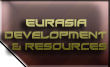
<style>
.page{position:relative;width:110px;height:67px}
.page>*{position:absolute;margin:0}
.t1{font:9.5px "Xirod-Regular";scale:0.96 1}
.t2{font:9.1px "Xirod-Regular";scale:0.96 1}
.t3{font:10px "Xirod-Regular";scale:0.96 1}
</style>
<div class="page">
<p class="t1" style="left:4px;top:19px;width:103px;height:31px"><span class="t2">       </span><span class="t3">EURASIA <br> </span>DEVELOPMENT   <br>   &amp; RESOURCES</p>
</div>
